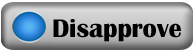
<style>
.page{position:relative;width:194px;height:52px}
.page>*{position:absolute;margin:0}
.t1{font:26.2px "BritannicBold";color:#000000}
</style>
<div class="page">
<p class="t1" style="left:53px;top:19px;width:128px;height:23px">Disapprove</p>
</div>
